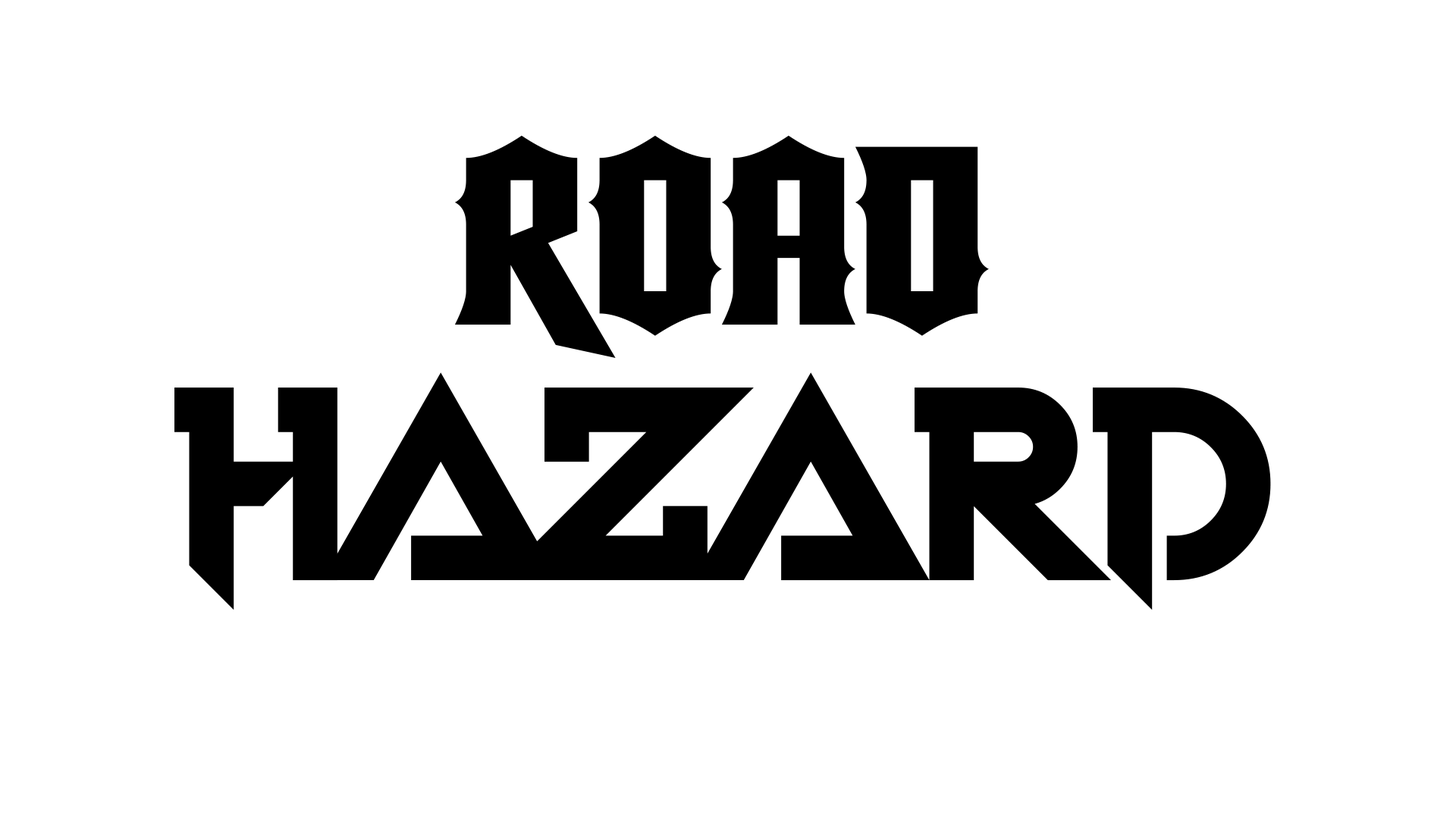
<style>
.page{position:relative;width:1456px;height:819px;background:#ffffff}
.page>*{position:absolute;margin:0}
.t1{font:227.5px "StringsTheory";color:#000000}
.t2{font:303.3px "VoiceInMyHead";color:#000000}
</style>
<div class="page">
<p class="t1" style="left:455px;top:135px;width:534px;height:223px">Road</p>
<p class="t2" style="left:174px;top:372px;width:1097px;height:238px">HAZARD</p>
</div>
